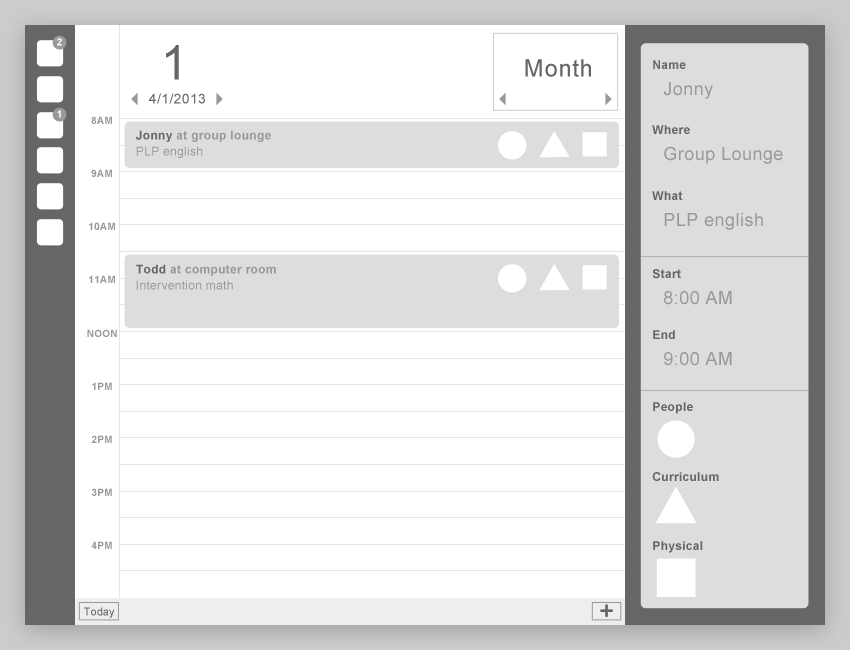
<style>
.page{position:relative;width:850px;height:650px;background:#ffffff}
.page>*{position:absolute;margin:0}
.t1{font:10px "Arial-BoldMT";letter-spacing:0.025em;color:#ffffff}
.t2{font:48px "ArialMT";letter-spacing:0.025em;color:#666666}
.t3{font:24px "ArialMT";letter-spacing:0.025em;color:#666666}
.t4{font:12px "Arial-BoldMT";letter-spacing:0.025em;color:#666666}
.t5{font:18px "ArialMT";letter-spacing:0.025em;color:#999999}
.t6{font:14px "ArialMT";letter-spacing:0.025em;color:#666666}
.t7{font:10px "Arial-BoldMT";letter-spacing:0.025em;color:#999999}
.t8{font:12px/16px "Arial-BoldMT";letter-spacing:0.025em;color:#999999}
.t9{font:12px/16px "Arial-BoldMT";letter-spacing:0.025em;color:#666666}
.t10{font:12px/16px "ArialMT";letter-spacing:0.025em;color:#999999}
.t11{font:11px "ArialMT";color:#666666}
</style>
<div class="page">
<p class="t1" style="left:57px;top:38px;width:5px;height:8px">2</p>
<p class="t2" style="left:166px;top:45px;width:13px;height:35px">1</p>
<p class="t3" style="left:525px;top:59px;width:66px;height:18px">Month</p>
<p class="t4" style="left:653px;top:60px;width:33px;height:9px">Name</p>
<p class="t5" style="left:663px;top:82px;width:50px;height:17px">Jonny</p>
<p class="t6" style="left:149px;top:93px;width:56px;height:11px">4/1/2013</p>
<p class="t1" style="left:57px;top:110px;width:4px;height:8px">1</p>
<p class="t7" style="left:91px;top:116px;width:21px;height:8px">8AM</p>
<p class="t4" style="left:652px;top:125px;width:38px;height:9px">Where</p>
<p class="t8" style="left:136px;top:130px;width:135px;height:28px"><span class="t9">Jonny </span>at group lounge<br><span class="t10">PLP english</span></p>
<p class="t5" style="left:664px;top:146px;width:119px;height:18px">Group Lounge</p>
<p class="t7" style="left:91px;top:169px;width:21px;height:8px">9AM</p>
<p class="t4" style="left:652px;top:191px;width:31px;height:9px">What</p>
<p class="t7" style="left:89px;top:222px;width:26px;height:8px">10AM</p>
<p class="t5" style="left:664px;top:213px;width:99px;height:17px">PLP english</p>
<p class="t10" style="left:136px;top:264px;width:140px;height:26px"><span class="t9">Todd </span><span class="t8">at computer room<br></span>Intervention math</p>
<p class="t4" style="left:652px;top:269px;width:29px;height:10px">Start</p>
<p class="t7" style="left:89px;top:275px;width:26px;height:8px">11AM</p>
<p class="t5" style="left:664px;top:291px;width:68px;height:14px">8:00 AM</p>
<p class="t7" style="left:87px;top:329px;width:30px;height:8px">NOON</p>
<p class="t4" style="left:653px;top:330px;width:22px;height:9px">End</p>
<p class="t5" style="left:664px;top:352px;width:68px;height:14px">9:00 AM</p>
<p class="t7" style="left:92px;top:382px;width:20px;height:8px">1PM</p>
<p class="t4" style="left:653px;top:402px;width:40px;height:12px">People</p>
<p class="t7" style="left:91px;top:435px;width:21px;height:8px">2PM</p>
<p class="t4" style="left:652px;top:472px;width:67px;height:9px">Curriculum</p>
<p class="t7" style="left:91px;top:488px;width:21px;height:8px">3PM</p>
<p class="t7" style="left:91px;top:541px;width:21px;height:8px">4PM</p>
<p class="t4" style="left:653px;top:541px;width:50px;height:12px">Physical</p>
<p class="t11" style="left:84px;top:607px;width:31px;height:11px">Today</p>
</div>
